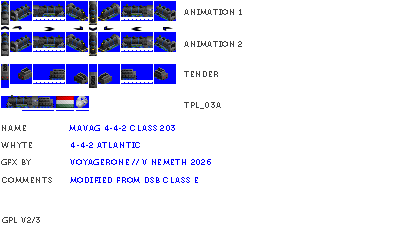
<style>
.page{position:relative;width:400px;height:230px;background:#ffffff}
.page>*{position:absolute;margin:0}
.t1{font:8px "Museo700-Regular";letter-spacing:0.075em;color:#404040;text-transform:uppercase}
.t2{font:8px "Museo700-Regular";letter-spacing:0.075em;color:#0000ff;text-transform:uppercase}
</style>
<div class="page">
<p class="t1" style="left:184px;top:9px;width:58px;height:6px">Animation 1</p>
<p class="t1" style="left:184px;top:41px;width:58px;height:6px">Animation 2</p>
<p class="t1" style="left:184px;top:71px;width:34px;height:6px">tender</p>
<p class="t1" style="left:184px;top:102px;width:37px;height:7px">tpl_03a</p>
<p class="t1" style="left:2px;top:125px;width:24px;height:6px">name</p>
<p class="t2" style="left:69px;top:125px;width:106px;height:6px">MAVAG 4-4-2 Class 203</p>
<p class="t1" style="left:1px;top:142px;width:31px;height:6px">whyte</p>
<p class="t2" style="left:71px;top:142px;width:69px;height:6px">4-4-2 atlantic</p>
<p class="t1" style="left:1px;top:159px;width:30px;height:6px">gfx by</p>
<p class="t2" style="left:70px;top:159px;width:141px;height:6px">voyagerone // v nemeth 2026</p>
<p class="t1" style="left:2px;top:177px;width:50px;height:6px">comments</p>
<p class="t2" style="left:70px;top:177px;width:128px;height:6px">modified from dsb class e</p>
<p class="t1" style="left:2px;top:217px;width:38px;height:6px">gpl v2/3</p>
</div>
